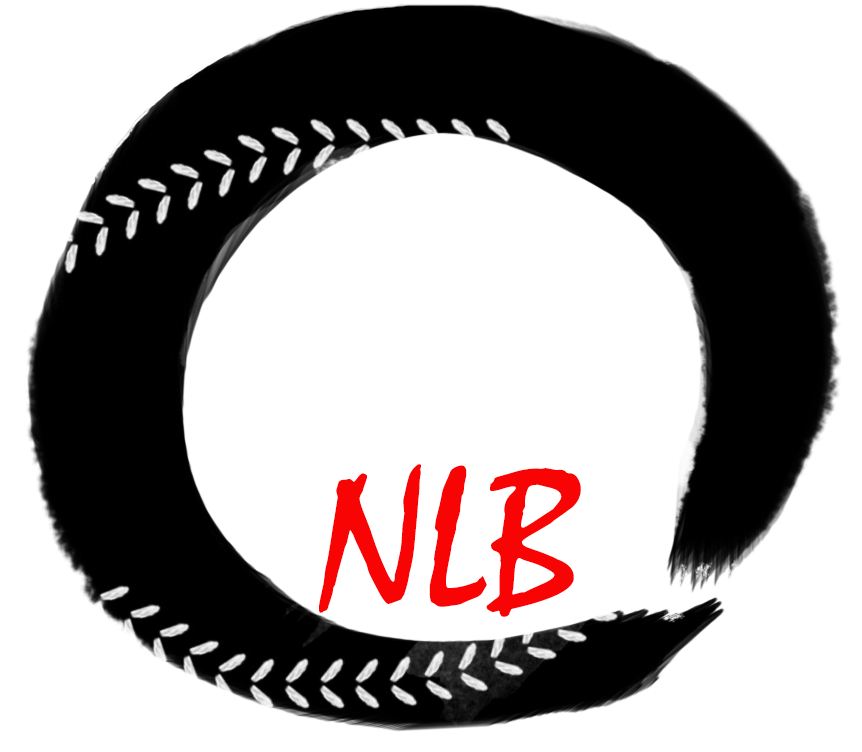
<style>
.page{position:relative;width:862px;height:752px;background:#ffffff}
.page>*{position:absolute;margin:0}
.t1{font:200px "Mistral";color:#f80404}
</style>
<div class="page">
<p class="t1" style="left:318px;top:464px;width:263px;height:153px">NLB</p>
</div>
